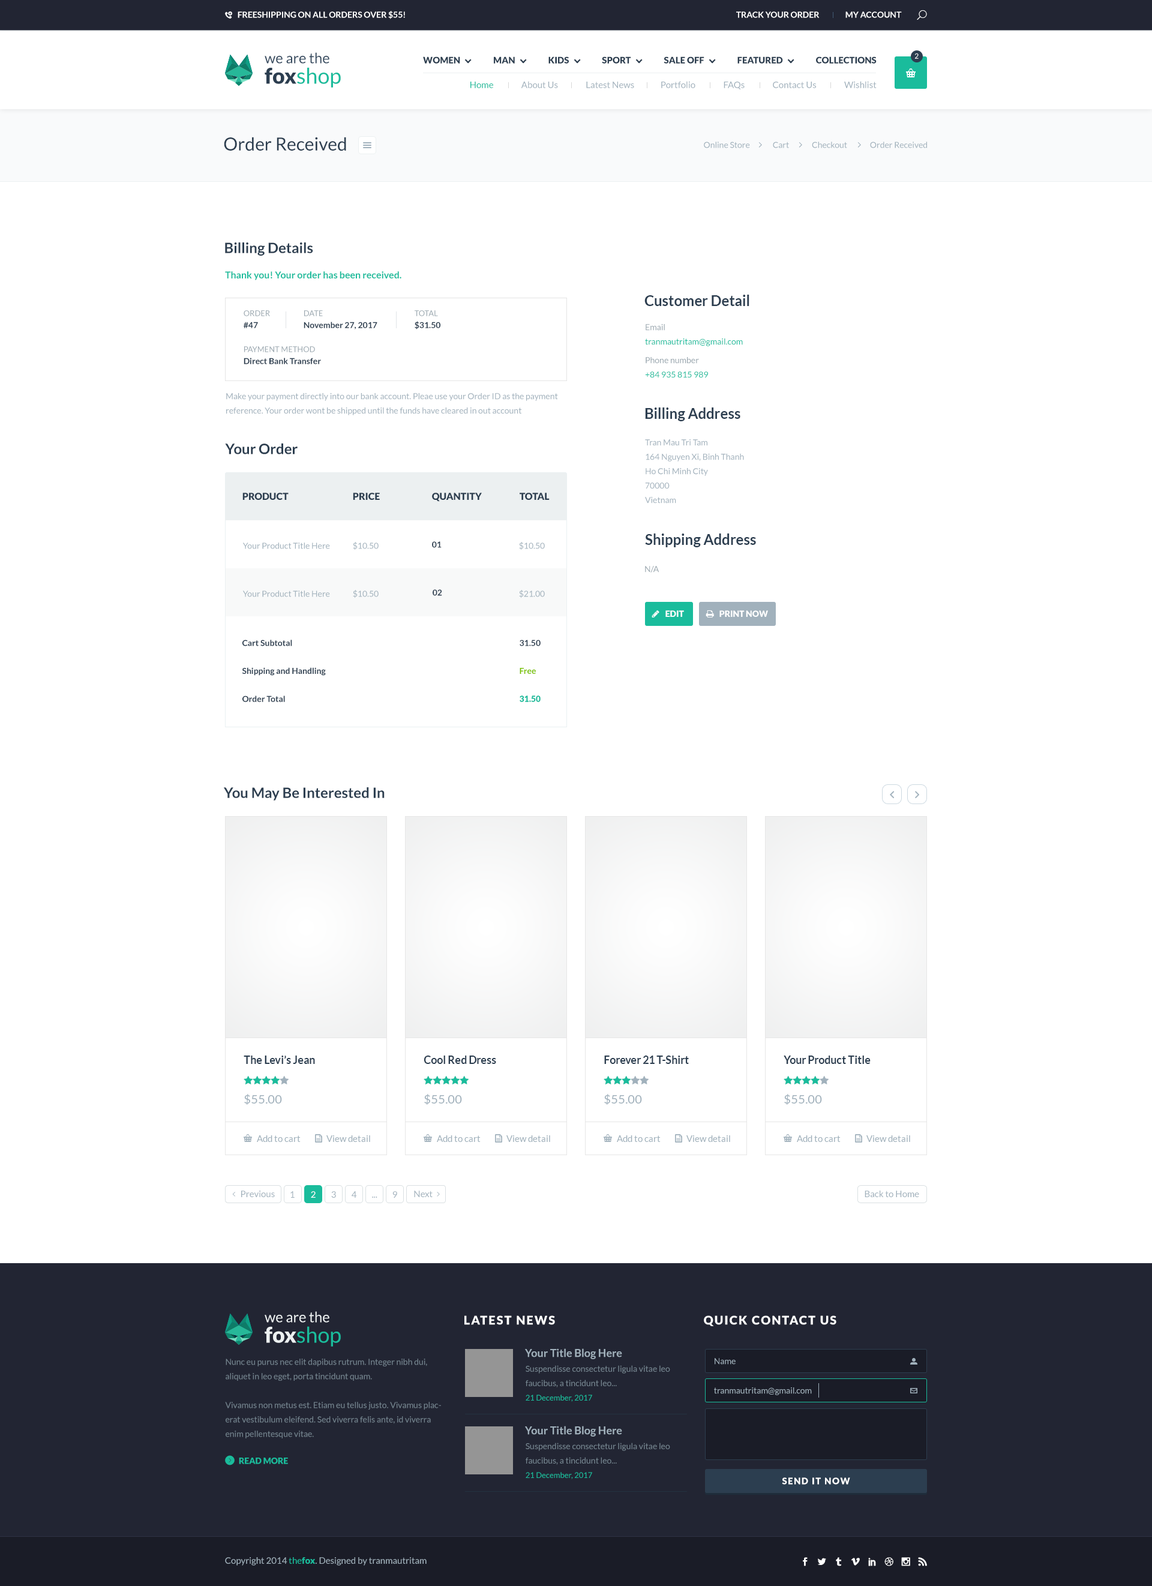
<style>
.page{position:relative;width:1152px;height:1586px;background:#ffffff}
.page>*{position:absolute;margin:0}
.t1{font:8.4px "Lato-Bold";color:#ffffff}
.t2{font:14.4px/20.4px "Lato-Regular";color:#34495e}
.t3{font:21.6px/20.4px "Lato-Black";color:#2c3e50}
.t4{font:21.6px/20.4px "Lato-Regular";color:#1abc9c}
.t5{font:7.2px "Lato-Regular";color:#ffffff}
.t6{font:9px "Lato-Black";color:#2c3e50;text-transform:uppercase}
.t7{font:9px "Lato-Regular";color:#a1b1bc}
.t8{font:9px "Lato-Regular";color:#1abc9c}
.t9{font:18px "Lato-Regular";color:#2c3e50}
.t10{font:8.4px "Lato-Regular";color:#a1b1bc}
.t11{font:14.4px "Lato-Bold";color:#2c3e50}
.t12{font:9.6px "Lato-Bold";color:#1abc9c}
.t13{font:7.8px/12px "Lato-Regular";color:#9aa7af}
.t14{font:8.4px/12px "Lato-Bold";color:#2c3e50}
.t15{font:8.4px/14.4px "Lato-Regular";color:#1abc9c}
.t16{font:8.4px/14.4px "Lato-Regular";color:#9aa7af}
.t17{font:8.4px/14.4px "Lato-Regular";color:#a1b1bc}
.t18{font:9.6px "Lato-Black";color:#2c3e50}
.t19{font:8.4px "Lato-Bold";color:#2c3e50}
.t20{font:8.4px "Lato-Regular";color:#9aa7af}
.t21{font:8.4px "Lato-Black";color:#ffffff;text-transform:uppercase}
.t22{font:8.4px/27.9px "Lato-Bold";color:#2c3e50}
.t23{font:8.4px/27.9px "Lato-Bold";color:#7bc200}
.t24{font:8.4px/27.9px "Lato-Black";color:#1abc9c}
.t25{font:9px "Lato-Regular";color:#ffffff}
.t26{font:14.4px/20.4px "Lato-Regular";color:#ecf0f1}
.t27{font:21.6px/20.4px "Lato-Black";color:#ecf0f1}
.t28{font:12px "Lato-Black";letter-spacing:0.1em;color:#ffffff;text-transform:uppercase}
.t29{font:10.8px "Lato-Bold";color:#a1b1bc}
.t30{font:8.4px/14.4px "Lato-Regular";color:#758590}
.t31{font:7.8px/14.4px "Lato-Regular";color:#1abc9c}
.t32{font:8.4px "Lato-Black";color:#1abc9c}
.t33{font:9px "Lato-Black";letter-spacing:0.1em;color:#ffffff}
.t34{font:9px "Lato-Black";color:#1abc9c}
</style>
<div class="page">
<p class="t1" style="left:238px;top:11px;width:167px;height:8px">FREESHIPPING ON ALL ORDERS OVER $55!</p>
<p class="t1" style="left:736px;top:11px;width:166px;height:7px">TRACK YOUR ORDER                MY ACCOUNT</p>
<p class="t2" style="left:265px;top:52px;width:76px;height:36px">we are the<br><span class="t3">fox</span><span class="t4">shop</span></p>
<p class="t5" style="left:914px;top:53px;width:5px;height:6px">2</p>
<p class="t6" style="left:423px;top:56px;width:454px;height:8px">Women                   Man                   KIDS                   SPORT                   Sale Off                   FEATURED                   COLLECTIONS</p>
<p class="t7" style="left:470px;top:81px;width:407px;height:8px"><span class="t8">Home</span>                About Us                Latest News               Portfolio                FAQs                Contact Us                Wishlist</p>
<p class="t9" style="left:224px;top:137px;width:122px;height:14px">Order Received</p>
<p class="t10" style="left:704px;top:142px;width:223px;height:6px">Online Store              Cart              Checkout              Order Received</p>
<p class="t11" style="left:225px;top:242px;width:88px;height:14px">Billing Details</p>
<p class="t12" style="left:225px;top:271px;width:176px;height:9px">Thank you! Your order has been received.</p>
<p class="t11" style="left:644px;top:295px;width:105px;height:11px">Customer Detail</p>
<p class="t13" style="left:244px;top:310px;width:26px;height:18px">ORDER<br><span class="t14">#47</span></p>
<p class="t14" style="left:304px;top:310px;width:73px;height:19px"><span class="t13">DATE<br></span>November 27, 2017</p>
<p class="t14" style="left:415px;top:310px;width:25px;height:19px"><span class="t13">TOTAL<br></span>$31.50</p>
<p class="t15" style="left:645px;top:324px;width:98px;height:22px"><span class="t16">Email<br></span>tranmautritam@gmail.com</p>
<p class="t14" style="left:244px;top:346px;width:77px;height:18px"><span class="t13">PAYMENT METHOD<br></span>Direct Bank Transfer</p>
<p class="t15" style="left:645px;top:357px;width:63px;height:21px"><span class="t16">Phone number<br></span>+84 935 815 989</p>
<p class="t17" style="left:226px;top:393px;width:332px;height:22px">Make your payment directly into our bank account. Pleae use your Order ID as the payment reference. Your order wont be shipped until the funds have cleared in out account</p>
<p class="t11" style="left:645px;top:407px;width:95px;height:14px">Billing Address</p>
<p class="t11" style="left:225px;top:443px;width:73px;height:11px">Your Order</p>
<p class="t17" style="left:645px;top:439px;width:99px;height:64px">Tran Mau Tri Tam<br>164 Nguyen Xi, Binh Thanh<br>Ho Chi Minh City<br>70000<br>Vietnam</p>
<p class="t18" style="left:242px;top:493px;width:47px;height:7px">PRODUCT</p>
<p class="t18" style="left:353px;top:493px;width:27px;height:7px">PRICE</p>
<p class="t18" style="left:432px;top:493px;width:50px;height:9px">QUANTITY</p>
<p class="t18" style="left:520px;top:493px;width:30px;height:7px">TOTAL</p>
<p class="t11" style="left:645px;top:533px;width:111px;height:14px">Shipping Address</p>
<p class="t10" style="left:243px;top:542px;width:87px;height:7px">Your Product Title Here</p>
<p class="t10" style="left:353px;top:542px;width:26px;height:8px">$10.50</p>
<p class="t19" style="left:432px;top:541px;width:10px;height:7px">01</p>
<p class="t10" style="left:519px;top:542px;width:26px;height:8px">$10.50</p>
<p class="t20" style="left:645px;top:566px;width:14px;height:6px">N/A</p>
<p class="t10" style="left:243px;top:590px;width:87px;height:7px">Your Product Title Here</p>
<p class="t10" style="left:353px;top:590px;width:26px;height:8px">$10.50</p>
<p class="t19" style="left:433px;top:589px;width:9px;height:7px">02</p>
<p class="t10" style="left:519px;top:590px;width:26px;height:8px">$21.00</p>
<p class="t21" style="left:665px;top:610px;width:19px;height:7px">edit</p>
<p class="t21" style="left:719px;top:610px;width:49px;height:7px">PRINT NOW</p>
<p class="t22" style="left:242px;top:640px;width:84px;height:62px">Cart Subtotal<br>Shipping and Handling<br>Order Total</p>
<p class="t22" style="left:520px;top:640px;width:21px;height:62px">31.50<br><span class="t23">Free<br></span><span class="t24">31.50</span></p>
<p class="t11" style="left:224px;top:787px;width:161px;height:13px">You May Be Interested In</p>
<p class="t7" style="left:257px;top:1135px;width:44px;height:7px">Add to cart</p>
<p class="t7" style="left:326px;top:1135px;width:44px;height:7px">View detail</p>
<p class="t7" style="left:437px;top:1135px;width:44px;height:7px">Add to cart</p>
<p class="t7" style="left:506px;top:1135px;width:44px;height:7px">View detail</p>
<p class="t7" style="left:617px;top:1135px;width:44px;height:7px">Add to cart</p>
<p class="t7" style="left:686px;top:1135px;width:44px;height:7px">View detail</p>
<p class="t7" style="left:797px;top:1135px;width:44px;height:7px">Add to cart</p>
<p class="t7" style="left:866px;top:1135px;width:44px;height:7px">View detail</p>
<p class="t7" style="left:241px;top:1190px;width:34px;height:7px">Previous</p>
<p class="t7" style="left:290px;top:1191px;width:5px;height:7px">1</p>
<p class="t25" style="left:311px;top:1191px;width:5px;height:7px">2</p>
<p class="t7" style="left:331px;top:1191px;width:5px;height:7px">3</p>
<p class="t7" style="left:352px;top:1191px;width:5px;height:7px">4</p>
<p class="t7" style="left:392px;top:1191px;width:5px;height:7px">9</p>
<p class="t7" style="left:414px;top:1190px;width:19px;height:7px">Next</p>
<p class="t7" style="left:865px;top:1190px;width:54px;height:7px">Back to Home</p>
<p class="t7" style="left:372px;top:1196px;width:5px;height:2px">...</p>
<p class="t26" style="left:265px;top:1311px;width:76px;height:35px">we are the<br><span class="t27">fox</span><span class="t4">shop</span></p>
<p class="t28" style="left:464px;top:1315px;width:91px;height:10px">Latest News</p>
<p class="t28" style="left:704px;top:1315px;width:132px;height:11px">quick contact us</p>
<p class="t29" style="left:525px;top:1348px;width:97px;height:11px">Your Title Blog Here</p>
<p class="t30" style="left:225px;top:1358px;width:216px;height:80px">Nunc eu purus nec elit dapibus rutrum. Integer nibh dui, aliquet in leo eget, porta tincidunt quam. <br><br>Vivamus non metus est. Etiam eu tellus justo. Vivamus placerat vestibulum eleifend. Sed viverra felis ante, id viverra enim pellentesque vitae.</p>
<p class="t10" style="left:715px;top:1358px;width:21px;height:6px">Name</p>
<p class="t30" style="left:526px;top:1365px;width:144px;height:37px">Suspendisse consectetur ligula vitae leo faucibus, a tincidunt leo...<br><span class="t31">21 December, 2017</span></p>
<p class="t10" style="left:714px;top:1387px;width:98px;height:8px">tranmautritam@gmail.com</p>
<p class="t29" style="left:525px;top:1426px;width:97px;height:10px">Your Title Blog Here</p>
<p class="t30" style="left:526px;top:1442px;width:144px;height:37px">Suspendisse consectetur ligula vitae leo faucibus, a tincidunt leo...<br><span class="t31">21 December, 2017</span></p>
<p class="t32" style="left:239px;top:1457px;width:49px;height:7px">READ MORE</p>
<p class="t33" style="left:782px;top:1477px;width:68px;height:7px">SEND IT NOW</p>
<p class="t7" style="left:225px;top:1557px;width:202px;height:8px">Copyright 2014 <span class="t8">the</span><span class="t34">fox</span>. Designed by tranmautritam</p>
</div>
